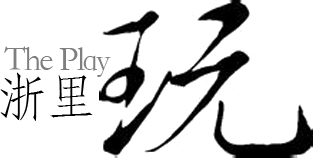
<style>
.page{position:relative;width:313px;height:158px;background:#ffffff}
.page>*{position:absolute;margin:0}
.t1{font:34.3px "STFangsong";letter-spacing:-0.05em;color:#7f7f7f}
.t2{font:52.8px "STFangsong";letter-spacing:-0.05em;color:#000000}
</style>
<div class="page">
<p class="t1" style="left:4px;top:46px;width:107px;height:31px">The Play</p>
<p class="t2" style="left:0px;top:72px;width:93px;height:49px">浙里</p>
</div>
